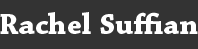
<style>
.page{position:relative;width:198px;height:49px;background:#333333}
.page>*{position:absolute;margin:0}
.t1{font:31px "ChaparralPro-Bold";color:#ffffff}
</style>
<div class="page">
<p class="t1" style="left:0px;top:12px;width:198px;height:22px">Rachel Suffian</p>
</div>
